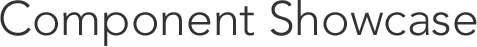
<style>
.page{position:relative;width:477px;height:47px;background:#ffffff}
.page>*{position:absolute;margin:0}
.t1{font:48px "Avenir-Light";color:#333333}
</style>
<div class="page">
<p class="t1" style="left:0px;top:0px;width:477px;height:46px">Component Showcase</p>
</div>
